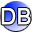
<style>
.page{position:relative;width:32px;height:32px;background:#ffffff}
.page>*{position:absolute;margin:0}
.t1{font:21.9px "ArialMT";color:#ffffff;font-weight:bold}
</style>
<div class="page">
<p class="t1" style="left:1px;top:8px;width:30px;height:17px">DB</p>
</div>
